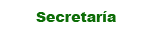
<style>
.page{position:relative;width:152px;height:32px;background:#ffffff}
.page>*{position:absolute;margin:0}
.t1{font:14px "Arial-Black";color:#0d6d07}
</style>
<div class="page">
<p class="t1" style="left:36px;top:11px;width:80px;height:11px">Secretaría</p>
</div>
